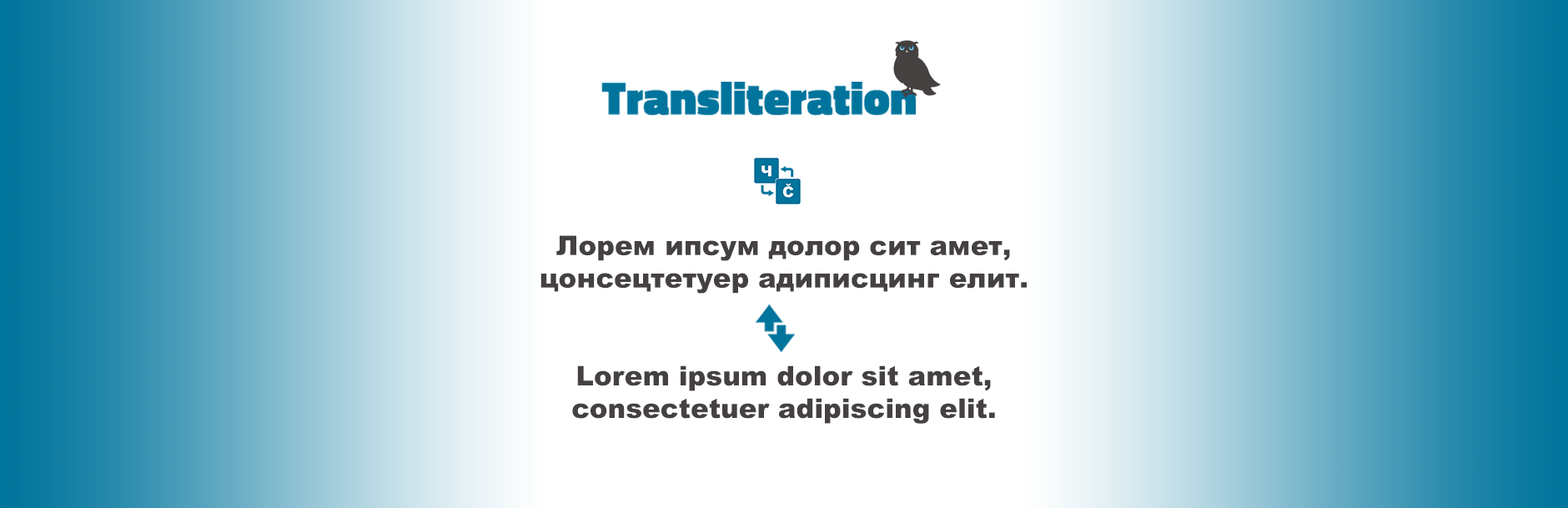
<style>
.page{position:relative;width:1568px;height:508px;background:#ffffff}
.page>*{position:absolute;margin:0}
.t1{font:27.2px "Arial-Black";color:#444140}
</style>
<div class="page">
<p class="t1" style="left:540px;top:235px;width:487px;height:189px;text-align:justify">Лорем ипсум долор сит амет,<br>цонсецтетуер адиписцинг елит.<br><br><br>Lorem ipsum dolor sit amet,<br>consectetuer adipiscing elit.</p>
</div>
